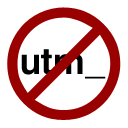
<style>
.page{position:relative;width:128px;height:128px;background:#ffffff}
.page>*{position:absolute;margin:0}
.t1{font:36px "Helvetica-Bold";color:#000000}
</style>
<div class="page">
<p class="t1" style="left:21px;top:49px;width:85px;height:30px">utm_</p>
</div>
